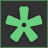
<style>
.page{position:relative;width:48px;height:48px;background:#333333}
.page>*{position:absolute;margin:0}
.t1{font:92px "LucidaSansUnicode";letter-spacing:0.02em;color:#6bce80;font-weight:bold}
</style>
<div class="page">
<p class="t1" style="left:5px;top:6px;width:38px;height:36px">*</p>
</div>
